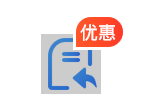
<style>
.page{position:relative;width:142px;height:112px;background:#ffffff}
.page>*{position:absolute;margin:0}
.t1{font:18px "PingFangSC-Medium";color:#ffffff}
</style>
<div class="page">
<p class="t1" style="left:80px;top:24px;width:36px;height:17px">优惠</p>
</div>
